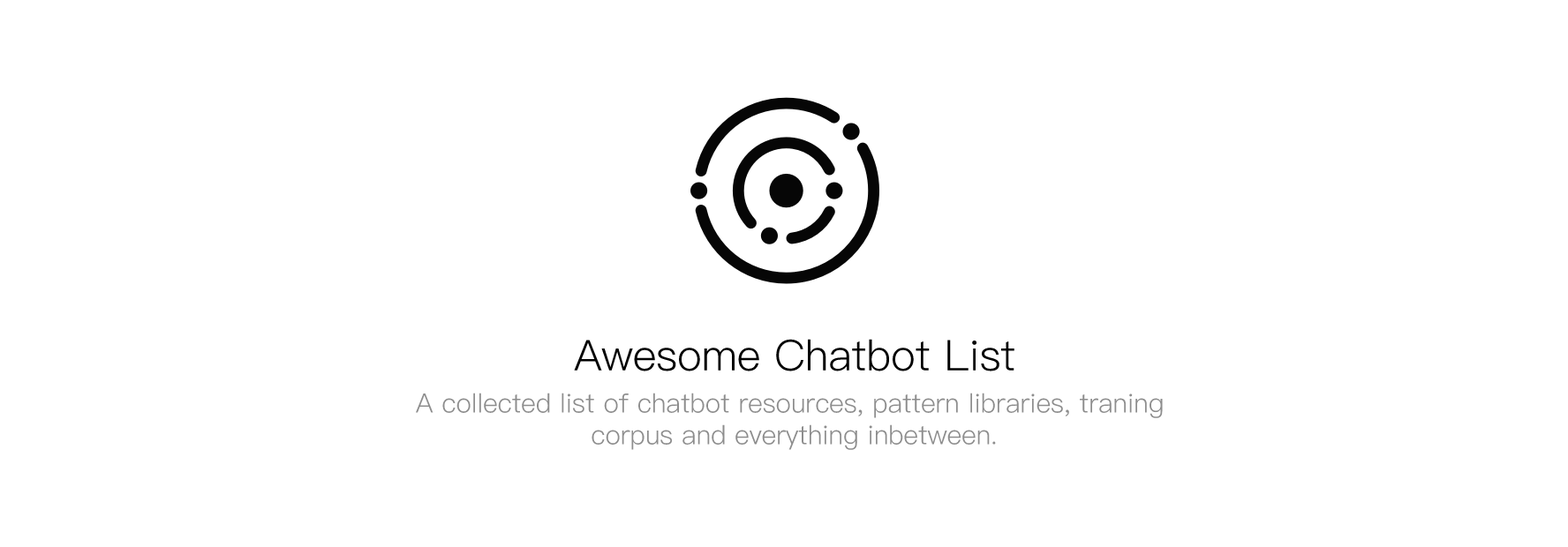
<style>
.page{position:relative;width:1568px;height:547px;background:#ffffff}
.page>*{position:absolute;margin:0}
.t1{font:42.4px "PingFangSC-Light";color:#010101}
.t2{font:26.5px "PingFangSC-Light";color:#8d8d8d}
</style>
<div class="page">
<p class="t1" style="left:574px;top:339px;width:440px;height:33px">Awesome Chatbot List</p>
<p class="t2" style="left:416px;top:393px;width:747px;height:57px;text-align:center">A collected list of chatbot resources, pattern libraries, traning <br>corpus and everything inbetween.</p>
</div>
